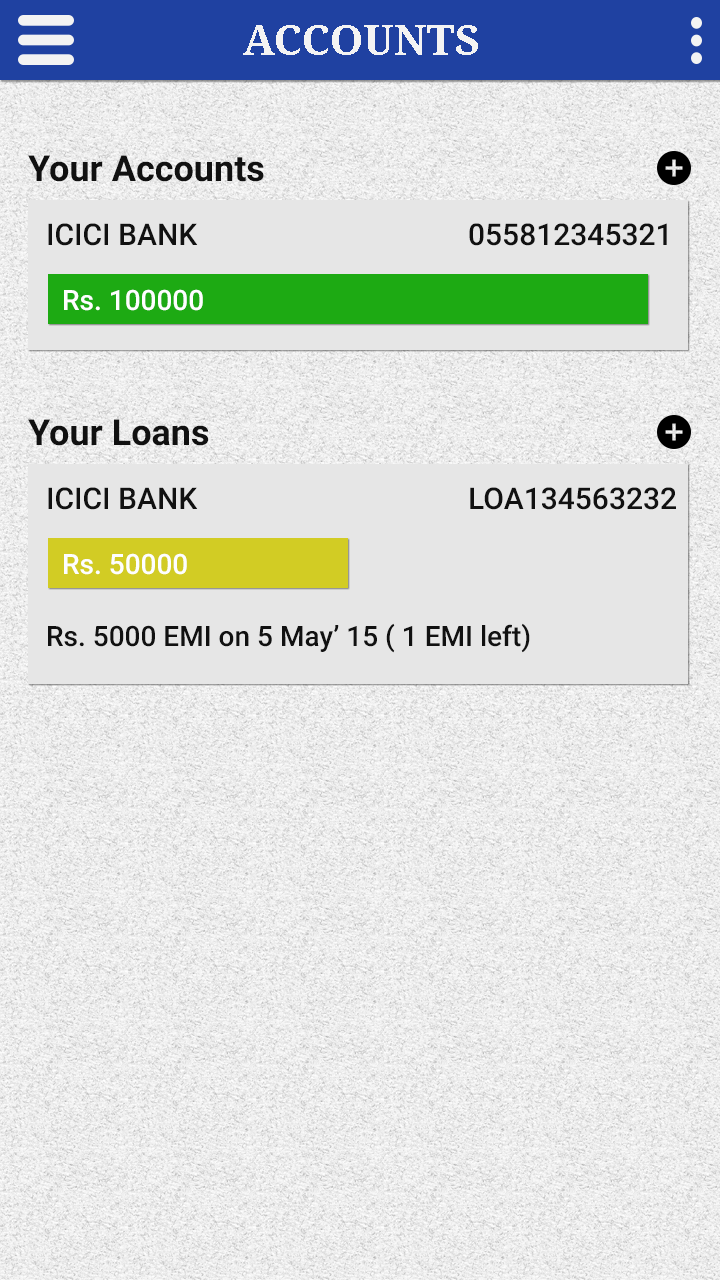
<style>
.page{position:relative;width:720px;height:1280px;background:#e6e6e6}
.page>*{position:absolute;margin:0}
.t1{font:42px "NotoSerif-Bold";color:#f3f3f3}
.t2{font:36px "Roboto-Bold";color:#111111}
.t3{font:30px "Roboto-Medium";color:#111111}
.t4{font:28px "Roboto-Medium";color:#fefefe}
.t5{font:28px "Roboto-Medium";color:#111111}
</style>
<div class="page">
<p class="t1" style="left:243px;top:25px;width:235px;height:30px">ACCOUNTS</p>
<p class="t2" style="left:28px;top:155px;width:236px;height:27px">Your Accounts</p>
<p class="t3" style="left:48px;top:223px;width:150px;height:23px">ICICI BANK</p>
<p class="t3" style="left:469px;top:223px;width:198px;height:23px">055812345321</p>
<p class="t4" style="left:64px;top:289px;width:139px;height:22px">Rs. 100000</p>
<p class="t2" style="left:28px;top:419px;width:181px;height:27px">Your Loans</p>
<p class="t3" style="left:48px;top:487px;width:150px;height:23px">ICICI BANK</p>
<p class="t3" style="left:470px;top:487px;width:206px;height:23px">LOA134563232</p>
<p class="t4" style="left:64px;top:553px;width:123px;height:22px">Rs. 50000</p>
<p class="t5" style="left:48px;top:623px;width:482px;height:30px">Rs. 5000 EMI on 5 May’ 15 ( 1 EMI left)</p>
</div>
